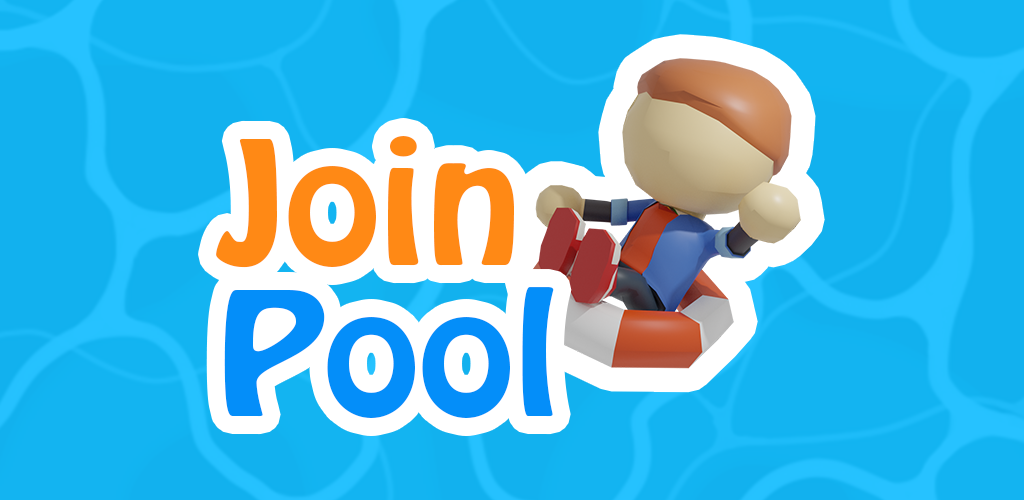
<style>
.page{position:relative;width:1024px;height:500px;background:#12b1ee}
.page>*{position:absolute;margin:0}
.t1{font:151.1px "HoboStd";color:#ff8915;scale:1.15 1}
.t2{font:151.1px "HoboStd";color:#048ef9;scale:1.15 1}
</style>
<div class="page">
<p class="t1" style="left:216px;top:136px;width:338px;height:282px">Join<br><span class="t2">Pool</span></p>
</div>
